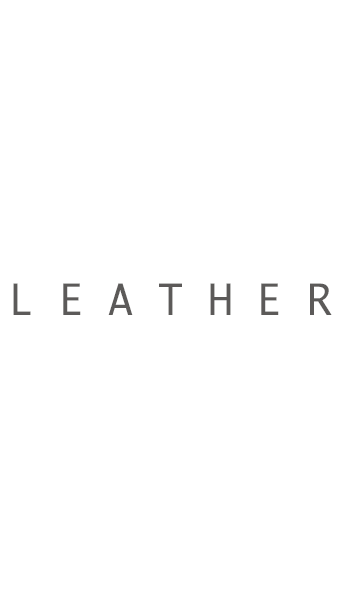
<style>
.page{position:relative;width:338px;height:600px;background:#ffffff}
.page>*{position:absolute;margin:0}
.t1{font:41.7px "Ayuthaya";color:#5c5a59}
</style>
<div class="page">
<p class="t1" style="left:13px;top:283px;width:319px;height:32px">L E A T H E R</p>
</div>
